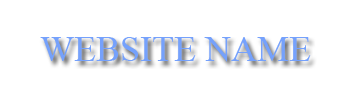
<style>
.page{position:relative;width:350px;height:100px;background:#ffffff}
.page>*{position:absolute;margin:0}
.t1{font:36px "TimesNewRomanPSMT";color:#75a1fc}
</style>
<div class="page">
<p class="t1" style="left:40px;top:37px;width:271px;height:25px">WEBSITE NAME</p>
</div>
